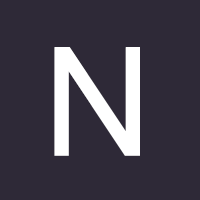
<style>
.page{position:relative;width:200px;height:200px;background:#2e2937}
.page>*{position:absolute;margin:0}
.t1{font:150.9px "ArialMT";letter-spacing:-0.075em;color:#ffffff;font-weight:bold}
</style>
<div class="page">
<p class="t1" style="left:54px;top:47px;width:86px;height:109px">N</p>
</div>
